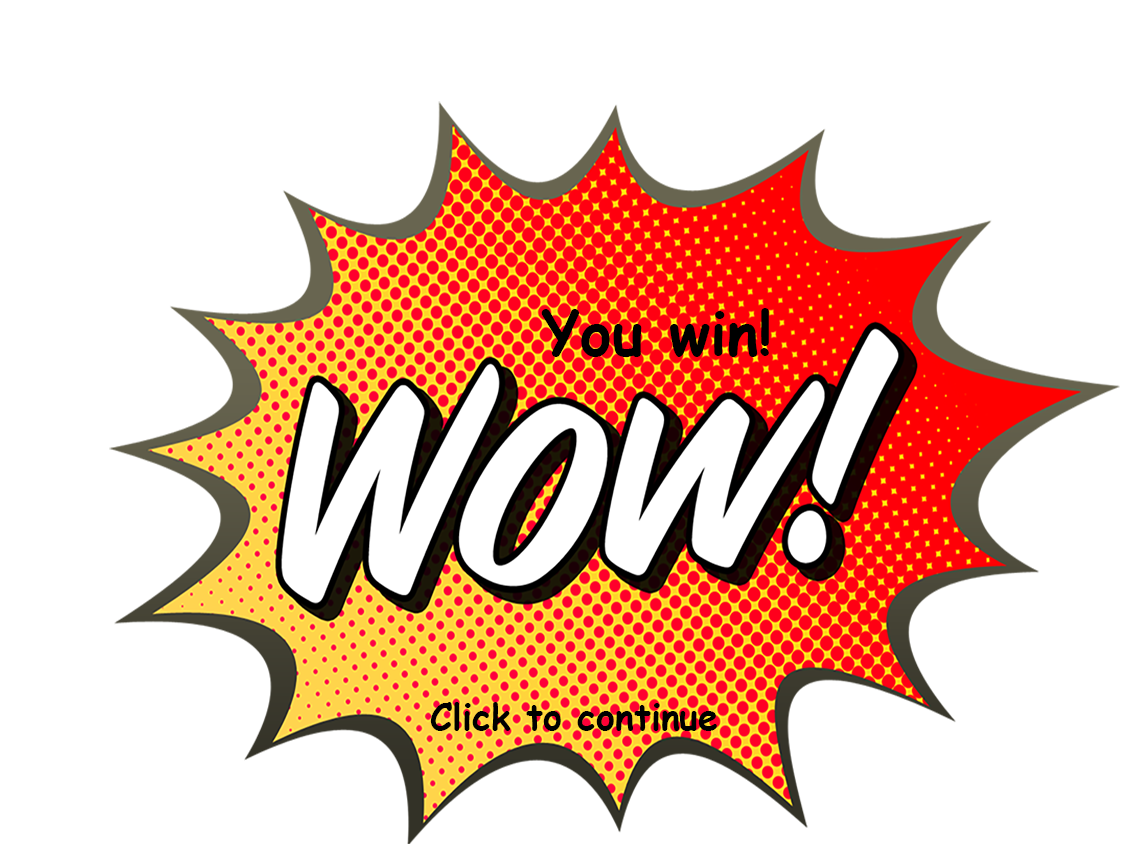
<style>
.page{position:relative;width:1124px;height:844px;background:#ffffff}
.page>*{position:absolute;margin:0}
.t1{font:60px "ComicSansMS-Bold";color:#000000}
.t2{font:36px "ComicSansMS-Bold";color:#000000}
</style>
<div class="page">
<p class="t1" style="left:541px;top:308px;width:228px;height:49px">You win!</p>
<p class="t2" style="left:430px;top:702px;width:287px;height:29px">Click to continue</p>
</div>
